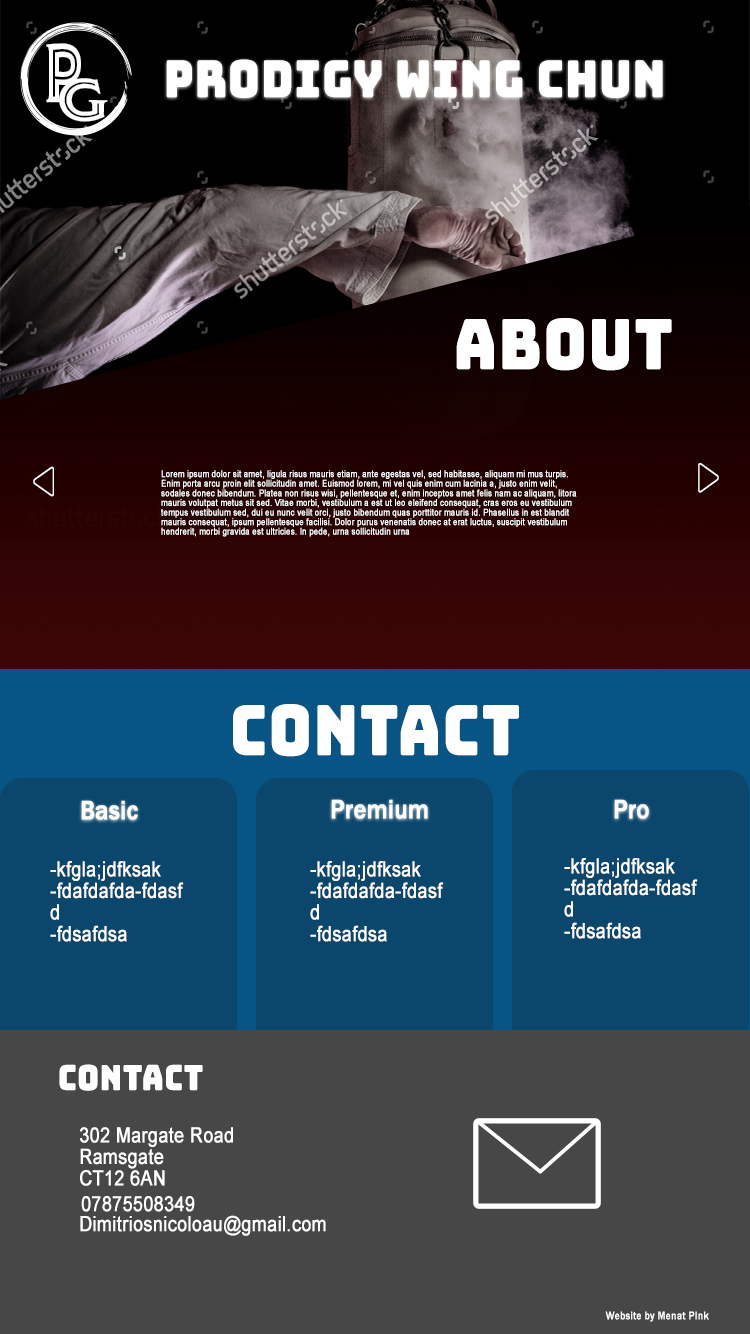
<style>
.page{position:relative;width:750px;height:1334px;background:#474747}
.page>*{position:absolute;margin:0}
.t1{font:50.6px "Bungee-Regular";letter-spacing:0.005em;color:#ffffff;font-weight:bold;scale:0.85 1}
.t2{font:69px "Bungee-Regular";letter-spacing:0.005em;color:#ffffff;font-weight:bold;scale:0.85 1}
.t3{font:9.2px "ArialMT";letter-spacing:0.005em;color:#ffffff;font-weight:bold;scale:0.85 1}
.t4{font:27.6px "FranklinGothic-Medium";letter-spacing:0.005em;color:#ffffff;font-weight:bold;scale:0.85 1}
.t5{font:27.6px "FranklinGothic-Medium";letter-spacing:0.005em;color:#fefefe;font-weight:bold;scale:0.85 1}
.t6{font:20.7px "ArialMT";letter-spacing:0.005em;color:#ffffff;font-weight:bold;scale:0.85 1}
.t7{font:34.5px "Bungee-Regular";letter-spacing:0.005em;color:#ffffff;font-weight:bold;scale:0.85 1}
.t8{font:34.5px "ArialMT";letter-spacing:0.005em;color:#ffffff;font-weight:bold;scale:0.85 1}
.t9{font:11.5px "FranklinGothic-Medium";letter-spacing:0.005em;color:#ffffff;font-weight:bold;scale:0.85 1}
</style>
<div class="page">
<p class="t1" style="left:166px;top:59px;width:497px;height:39px">Prodigy Wing Chun</p>
<p class="t2" style="left:456px;top:318px;width:216px;height:53px">About</p>
<p class="t1" style="left:33px;top:466px;width:21px;height:31px">◁</p>
<p class="t3" style="left:161px;top:470px;width:416px;height:67px">Lorem ipsum dolor sit amet, ligula risus mauris etiam, ante egestas vel, sed habitasse, aliquam mi mus turpis. Enim porta arcu proin elit sollicitudin amet. Euismod lorem, mi vel quis enim cum lacinia a, justo enim velit, sodales donec bibendum. Platea non risus wisi, pellentesque et, enim inceptos amet felis nam ac aliquam, litora mauris volutpat metus sit sed. Vitae morbi, vestibulum a est ut leo eleifend consequat, cras eros eu vestibulum tempus vestibulum sed, dui eu nunc velit orci, justo bibendum quas porttitor mauris id. Phasellus in est blandit mauris consequat, ipsum pellentesque facilisi. Dolor purus venenatis donec at erat luctus, suscipit vestibulum hendrerit, morbi gravida est ultricies. In pede, urna sollicitudin urna</p>
<p class="t1" style="left:698px;top:463px;width:21px;height:30px">▷</p>
<p class="t2" style="left:233px;top:704px;width:286px;height:53px">Contact</p>
<p class="t4" style="left:81px;top:800px;width:57px;height:20px">Basic</p>
<p class="t4" style="left:331px;top:799px;width:97px;height:20px">Premium</p>
<p class="t5" style="left:614px;top:799px;width:35px;height:20px">Pro</p>
<p class="t6" style="left:50px;top:861px;width:134px;height:81px">-kfgla;jdfksak<br>-fdafdafda-fdasfd<br>-fdsafdsa</p>
<p class="t6" style="left:310px;top:861px;width:134px;height:81px">-kfgla;jdfksak<br>-fdafdafda-fdasfd<br>-fdsafdsa</p>
<p class="t6" style="left:564px;top:858px;width:134px;height:81px">-kfgla;jdfksak<br>-fdafdafda-fdasfd<br>-fdsafdsa</p>
<p class="t7" style="left:59px;top:1064px;width:144px;height:27px">Contact</p>
<p class="t6" style="left:80px;top:1127px;width:153px;height:59px">302 Margate Road<br>Ramsgate<br>CT12 6AN<br><span class="t8"><br><br>RAms<br>RAms</span></p>
<p class="t6" style="left:81px;top:1196px;width:114px;height:16px">07875508349</p>
<p class="t6" style="left:80px;top:1215px;width:246px;height:21px">Dimitriosnicoloau@gmail.com</p>
<p class="t9" style="left:605px;top:1311px;width:104px;height:11px">Website by Menat PInk</p>
</div>
